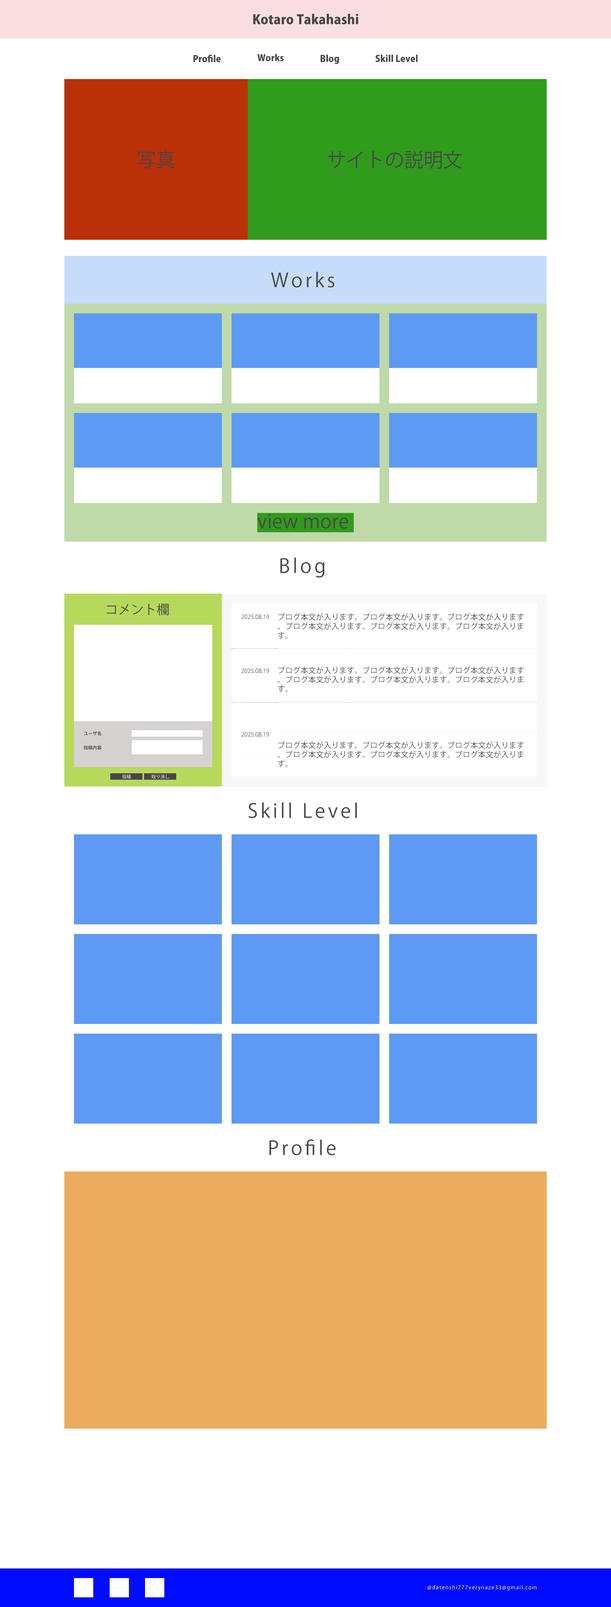
<style>
.page{position:relative;width:611px;height:1607px;background:#ffffff}
.page>*{position:absolute;margin:0}
.t1{font:12.9px "KozGoPr6N-Heavy";letter-spacing:0.005em;color:#474747}
.t2{font:9px "KozGoPr6N-Heavy";letter-spacing:0.005em;color:#474747}
.t3{font:19.3px "KozGoPr6N-Regular";letter-spacing:0.005em;color:#474747}
.t4{font:19.3px "KozGoPr6N-Regular";letter-spacing:0.14em;color:#474747}
.t5{font:12.9px "KozGoPr6N-Regular";color:#474747}
.t6{font:5.8px "KozGoPr6N-Regular";color:#474747}
.t7{font:7.7px "KozGoPr6N-Regular";color:#474747}
.t8{font:4.5px "KozGoPr6N-Bold";color:#474747}
.t9{font:4.5px "KozGoPr6N-Regular";color:#ffffff}
.t10{font:5.1px "KozGoPr6N-Regular";letter-spacing:0.14em;color:#ffffff}
</style>
<div class="page">
<p class="t1" style="left:253px;top:14px;width:105px;height:10px">Kotaro Takahashi</p>
<p class="t2" style="left:257px;top:54px;width:27px;height:7px">Works</p>
<p class="t2" style="left:193px;top:55px;width:28px;height:7px">Profile</p>
<p class="t2" style="left:320px;top:55px;width:19px;height:9px">Blog</p>
<p class="t2" style="left:375px;top:55px;width:43px;height:7px">Skill Level</p>
<p class="t3" style="left:137px;top:150px;width:38px;height:19px">写真</p>
<p class="t3" style="left:328px;top:150px;width:134px;height:19px">サイトの説明文</p>
<p class="t4" style="left:271px;top:272px;width:63px;height:16px">Works</p>
<p class="t3" style="left:257px;top:514px;width:91px;height:15px">view more</p>
<p class="t4" style="left:280px;top:557px;width:44px;height:21px">Blog</p>
<p class="t5" style="left:107px;top:603px;width:62px;height:13px">コメント欄</p>
<p class="t6" style="left:241px;top:615px;width:28px;height:4px">2025.08.19</p>
<p class="t7" style="left:277px;top:613px;width:247px;height:26px">ブログ本文が入ります。ブログ本文が入ります。ブログ本文が入ります<br>。ブログ本文が入ります。ブログ本文が入ります。ブログ本文が入りま<br>す。</p>
<p class="t6" style="left:241px;top:669px;width:28px;height:4px">2025.08.19</p>
<p class="t7" style="left:277px;top:666px;width:247px;height:26px">ブログ本文が入ります。ブログ本文が入ります。ブログ本文が入ります<br>。ブログ本文が入ります。ブログ本文が入ります。ブログ本文が入りま<br>す。</p>
<p class="t8" style="left:84px;top:731px;width:17px;height:5px">ユーザ名</p>
<p class="t6" style="left:241px;top:732px;width:28px;height:5px">2025.08.19</p>
<p class="t8" style="left:84px;top:745px;width:18px;height:5px">投稿内容</p>
<p class="t7" style="left:277px;top:741px;width:247px;height:26px">ブログ本文が入ります。ブログ本文が入ります。ブログ本文が入ります<br>。ブログ本文が入ります。ブログ本文が入ります。ブログ本文が入りま<br>す。</p>
<p class="t9" style="left:122px;top:775px;width:9px;height:4px">投稿</p>
<p class="t9" style="left:151px;top:775px;width:18px;height:4px">取り消し</p>
<p class="t4" style="left:248px;top:802px;width:109px;height:16px">Skill Level</p>
<p class="t4" style="left:269px;top:1139px;width:67px;height:17px">Profile</p>
<p class="t10" style="left:427px;top:1585px;width:109px;height:6px">@datenshi777verynaze33@gmail.com</p>
</div>
